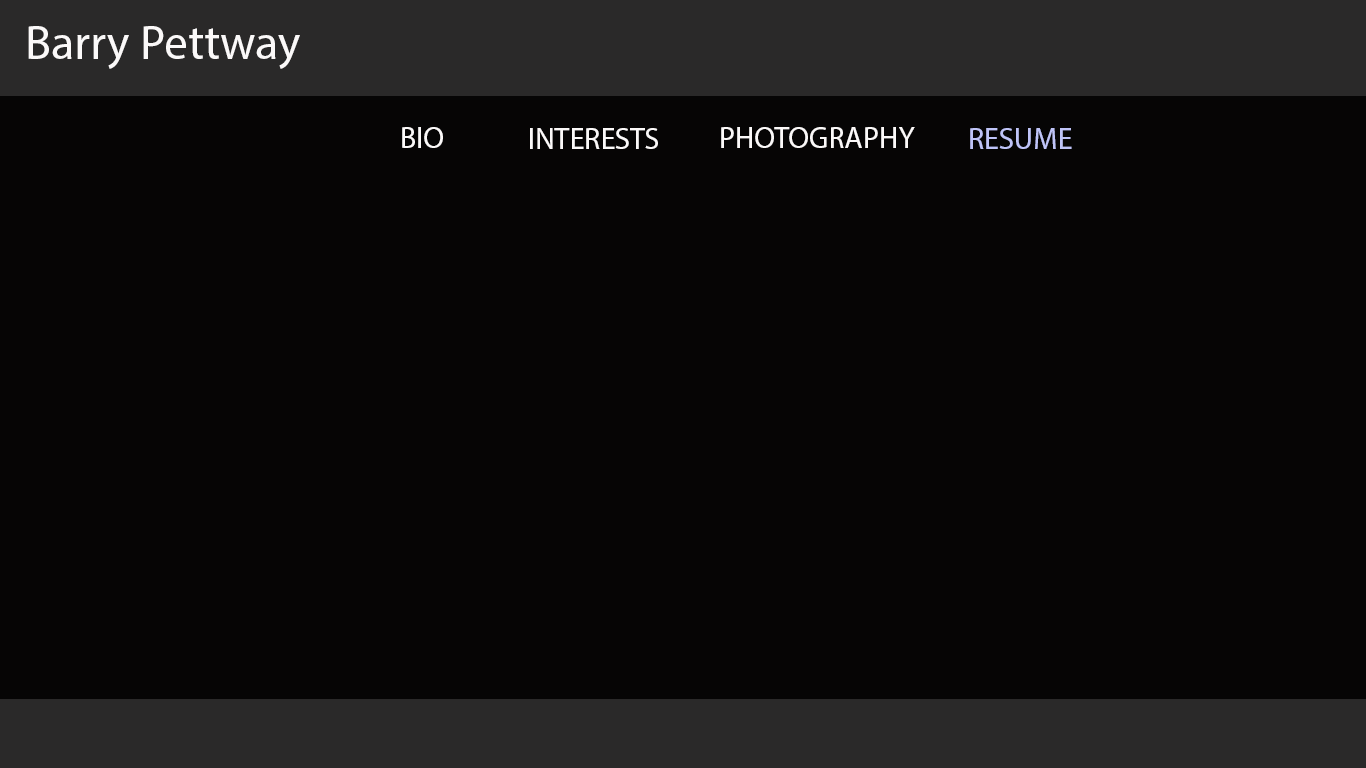
<style>
.page{position:relative;width:1366px;height:768px;background:#060505}
.page>*{position:absolute;margin:0}
.t1{font:48px "MyriadPro-Regular";color:#fbf9f9}
.t2{font:30px "MyriadPro-Regular";color:#fbf9f9}
.t3{font:30px "MyriadPro-Regular";color:#bfc4f8}
</style>
<div class="page">
<p class="t1" style="left:28px;top:26px;width:272px;height:43px">Barry Pettway</p>
<p class="t2" style="left:402px;top:127px;width:41px;height:21px">BIO</p>
<p class="t2" style="left:530px;top:128px;width:128px;height:21px">INTERESTS</p>
<p class="t2" style="left:721px;top:127px;width:194px;height:21px">PHOTOGRAPHY</p>
<p class="t3" style="left:970px;top:128px;width:102px;height:21px">RESUME</p>
</div>
